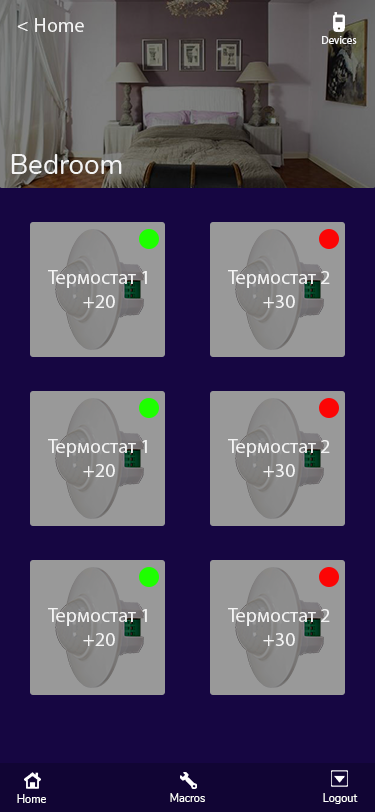
<style>
.page{position:relative;width:375px;height:812px;background:#160642}
.page>*{position:absolute;margin:0}
.t1{font:20px "MyriadPro-Regular";color:#f3f3f3}
.t2{font:20px "Nunito-Regular";color:#f3f3f3}
.t3{font:11px "MyriadPro-Regular";color:#f3f3f3}
.t4{font:28px "Nunito-Regular";color:#f3f3f3}
.t5{font:11px "Nunito-Regular";color:#ffffff}
</style>
<div class="page">
<p class="t1" style="left:17px;top:18px;width:67px;height:14px"><span class="t2">&lt; </span>Home</p>
<p class="t3" style="left:322px;top:36px;width:35px;height:8px">Devices</p>
<p class="t4" style="left:11px;top:154px;width:111px;height:20px">Bedroom</p>
<p class="t1" style="left:48px;top:270px;width:99px;height:38px;text-align:center">Термостат 1<br>+20</p>
<p class="t1" style="left:228px;top:270px;width:102px;height:38px;text-align:center">Термостат 2<br>+30</p>
<p class="t1" style="left:48px;top:439px;width:99px;height:38px;text-align:center">Термостат 1<br>+20</p>
<p class="t1" style="left:228px;top:439px;width:102px;height:38px;text-align:center">Термостат 2<br>+30</p>
<p class="t1" style="left:48px;top:608px;width:99px;height:38px;text-align:center">Термостат 1<br>+20</p>
<p class="t1" style="left:228px;top:608px;width:102px;height:38px;text-align:center">Термостат 2<br>+30</p>
<p class="t5" style="left:17px;top:794px;width:29px;height:9px">Home</p>
<p class="t5" style="left:170px;top:793px;width:35px;height:9px">Macros</p>
<p class="t5" style="left:323px;top:793px;width:35px;height:11px">Logout</p>
</div>
